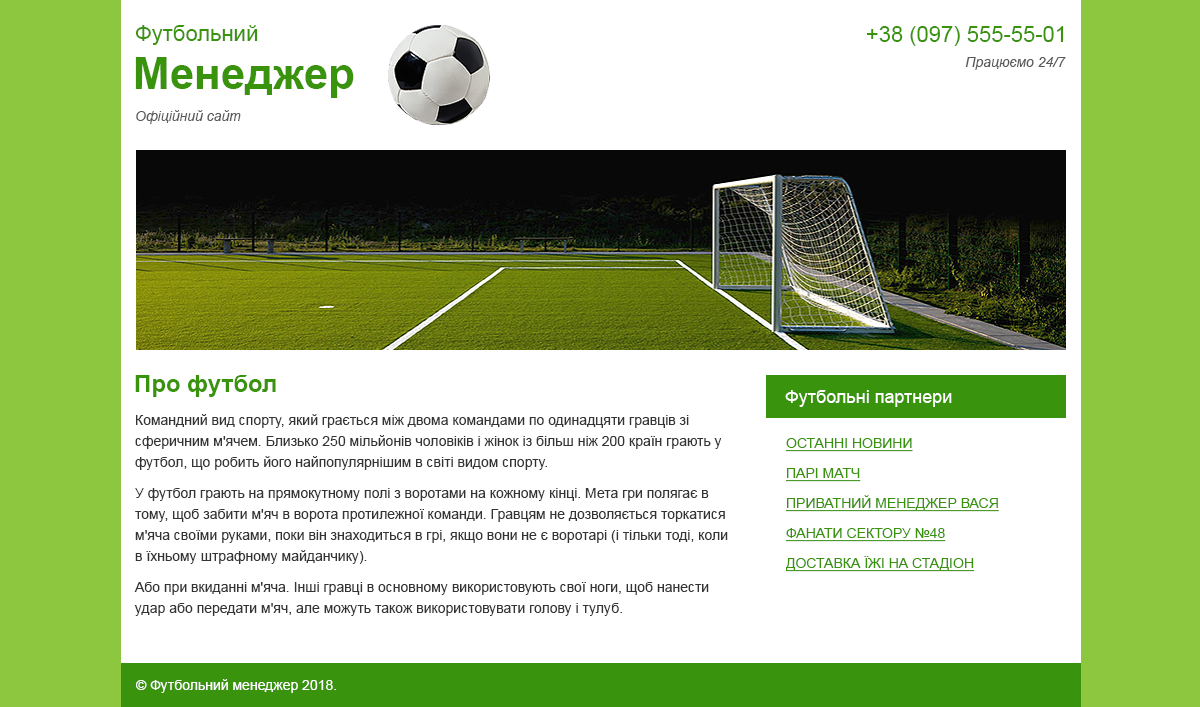
<style>
.page{position:relative;width:1200px;height:707px;background:#ffffff}
.page>*{position:absolute;margin:0}
.t1{font:22px "ArialMT";color:#39930d}
.t2{font:44px "Arial-BoldMT";color:#39930d}
.t3{font:14px "Arial-ItalicMT";color:#5a5a5a}
.t4{font:24px "Arial-BoldMT";color:#39930d}
.t5{font:18px "ArialMT";color:#ffffff}
.t6{font:14px/21px "ArialMT";color:#343434}
.t7{font:14px/30px "ArialMT";color:#39930d;text-transform:uppercase;text-decoration:underline}
.t8{font:14px "ArialMT";color:#ffffff}
</style>
<div class="page">
<p class="t1" style="left:135px;top:25px;width:123px;height:20px">Футбольний</p>
<p class="t1" style="left:866px;top:26px;width:198px;height:20px">+38 (097) 555-55-01</p>
<p class="t2" style="left:135px;top:57px;width:219px;height:41px">Менеджер</p>
<p class="t3" style="left:965px;top:57px;width:101px;height:13px">Працюємо 24/7</p>
<p class="t3" style="left:136px;top:110px;width:105px;height:14px">Офіційний сайт</p>
<p class="t4" style="left:135px;top:375px;width:141px;height:22px">Про футбол</p>
<p class="t5" style="left:785px;top:390px;width:167px;height:17px">Футбольні партнери</p>
<p class="t6" style="left:134px;top:414px;width:594px;height:202px">Командний вид спорту, який грається між двома командами по одинадцяти гравців зі сферичним м'ячем. Близько 250 мільйонів чоловіків і жінок із більш ніж 200 країн грають у футбол, що робить його найпопулярнішим в світі видом спорту.<br>У футбол грають на прямокутному полі з воротами на кожному кінці. Мета гри полягає в тому, щоб забити м'яч в ворота протилежної команди. Гравцям не дозволяється торкатися м'яча своїми руками, поки він знаходиться в грі, якщо вони не є воротарі (і тільки тоді, коли в їхньому штрафному майданчику). <br>Або при вкиданні м'яча. Інші гравці в основному використовують свої ноги, щоб нанести удар або передати м'яч, але можуть також використовувати голову і тулуб.</p>
<p class="t7" style="left:786px;top:438px;width:213px;height:134px">останні новини<br>Парі матч<br>приватний менеджер Вася<br>фанати сектору №48<br>доставка їжі на стадіон</p>
<p class="t8" style="left:136px;top:679px;width:200px;height:14px">© Футбольний менеджер 2018.</p>
</div>
